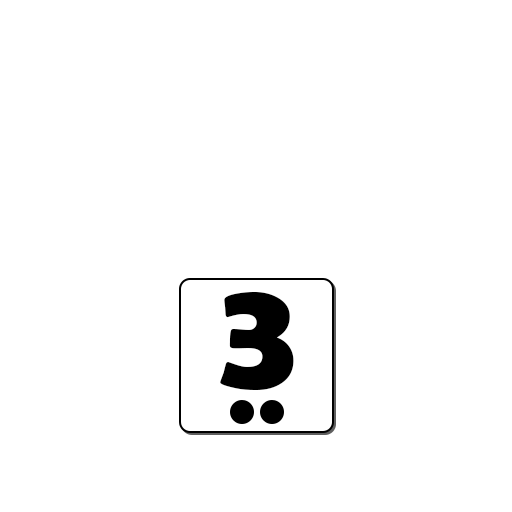
<style>
.page{position:relative;width:512px;height:512px;background:#ffffff}
.page>*{position:absolute;margin:0}
.t1{font:160px "BerlinSansFBDemi-Bold";color:#000000}
</style>
<div class="page">
<p class="t1" style="left:220px;top:292px;width:74px;height:98px">3</p>
</div>
